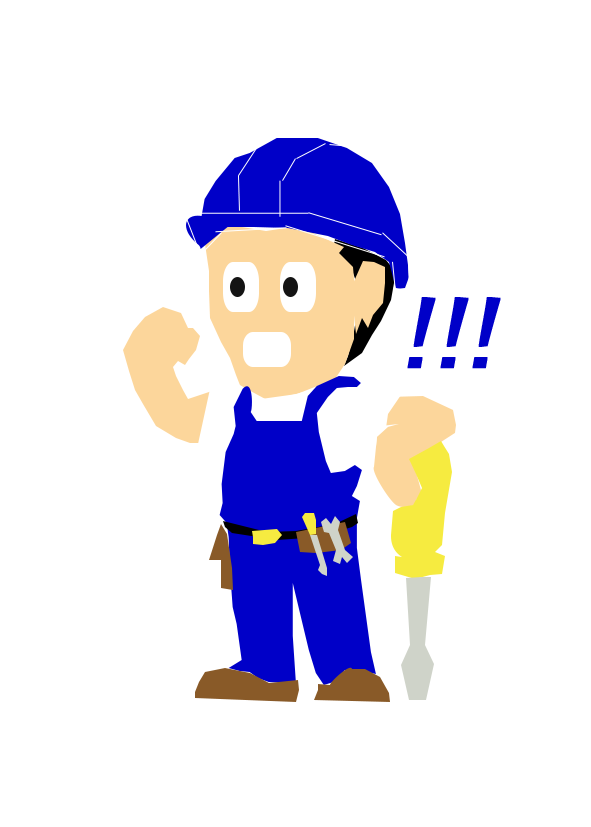
<style>
.page{position:relative;width:591px;height:827px;background:#ffffff}
.page>*{position:absolute;margin:0}
.t1{font:100px "LithosPro-Regular";letter-spacing:-0.005em;color:#0000c8;font-weight:bold;font-style:italic}
</style>
<div class="page">
<p class="t1" style="left:407px;top:297px;width:94px;height:72px">!!!</p>
</div>
